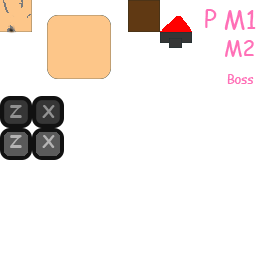
<style>
.page{position:relative;width:256px;height:256px;background:#ffffff}
.page>*{position:absolute;margin:0}
.t1{font:25px "ComicSansMS";color:#ff70b7}
.t2{font:20.8px "ComicSansMS";color:#ff70b7}
.t3{font:12.5px "ComicSansMS";color:#ff70b7}
.t4{font:16.7px "ComicSansMS-Bold";color:#919191}
.t5{font:16.7px "ComicSansMS-Bold";color:#b4b3b3}
</style>
<div class="page">
<p class="t1" style="left:205px;top:9px;width:12px;height:19px">P</p>
<p class="t1" style="left:224px;top:10px;width:32px;height:20px">M1</p>
<p class="t2" style="left:225px;top:40px;width:29px;height:17px">M2</p>
<p class="t3" style="left:227px;top:74px;width:27px;height:10px">Boss</p>
<p class="t4" style="left:10px;top:105px;width:12px;height:13px">Z</p>
<p class="t4" style="left:42px;top:105px;width:13px;height:13px">X</p>
<p class="t5" style="left:10px;top:135px;width:12px;height:13px">Z</p>
<p class="t5" style="left:42px;top:135px;width:13px;height:13px">X</p>
</div>
